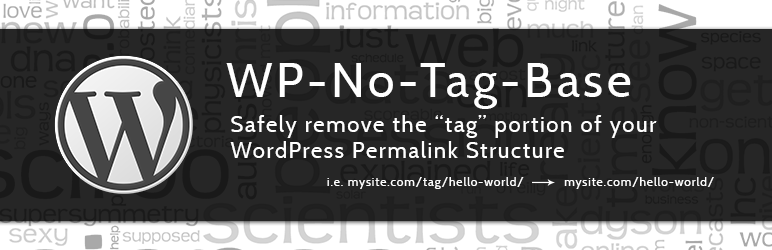
<style>
.page{position:relative;width:772px;height:250px;background:#262626}
.page>*{position:absolute;margin:0}
.t1{font:48px "Cabin-Regular";letter-spacing:0.075em;color:#ffffff}
.t2{font:22px "Cabin-Regular";letter-spacing:0.075em;color:#ffffff}
.t3{font:12px "Cabin-Regular";letter-spacing:0.075em;color:#ffffff}
</style>
<div class="page">
<p class="t1" style="left:226px;top:63px;width:405px;height:46px">WP-No-Tag-Base</p>
<p class="t2" style="left:230px;top:115px;width:427px;height:43px">Safely remove the “tag” portion of your <br>WordPress Permalink Structure</p>
<p class="t3" style="left:327px;top:177px;width:387px;height:12px">i.e. mysite.com/tag/hello-world/           mysite.com/hello-world/</p>
</div>
